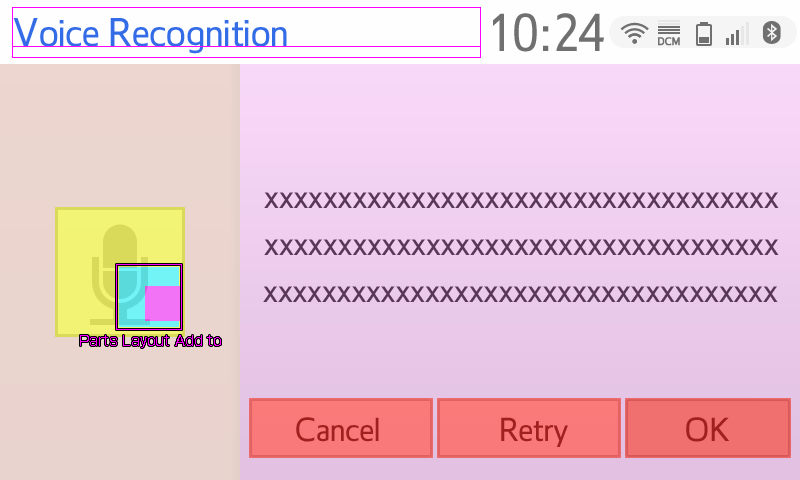
<style>
.page{position:relative;width:800px;height:480px}
.page>*{position:absolute;margin:0}
.t1{font:48px "Tfont1502_T2S";letter-spacing:0.05em;color:#707071}
.t2{font:36px "Tfont1502_T1S";color:#336ce6}
.t3{font:30px "Tfont1502_T1S";color:#583859}
.t4{font:14px "ShinGoPro-Regular";color:#ff00ff}
.t5{font:30px "Tfont1502_T1S";color:#a02020}
</style>
<div class="page">
<p class="t1" style="left:493px;top:13px;width:111px;height:39px">10:24</p>
<p class="t2" style="left:13px;top:18px;width:274px;height:36px">Voice Recognition</p>
<p class="t3" style="left:264px;top:192px;width:515px;height:16px">xxxxxxxxxxxxxxxxxxxxxxxxxxxxxxxxxxx</p>
<p class="t3" style="left:264px;top:239px;width:515px;height:16px">xxxxxxxxxxxxxxxxxxxxxxxxxxxxxxxxxxx</p>
<p class="t3" style="left:263px;top:286px;width:515px;height:16px">xxxxxxxxxxxxxxxxxxxxxxxxxxxxxxxxxxx</p>
<p class="t4" style="left:80px;top:335px;width:141px;height:13px">Parts Layout Add to</p>
<p class="t5" style="left:296px;top:417px;width:83px;height:25px">Cancel</p>
<p class="t5" style="left:501px;top:417px;width:67px;height:30px">Retry</p>
<p class="t5" style="left:686px;top:417px;width:44px;height:25px">OK</p>
</div>
